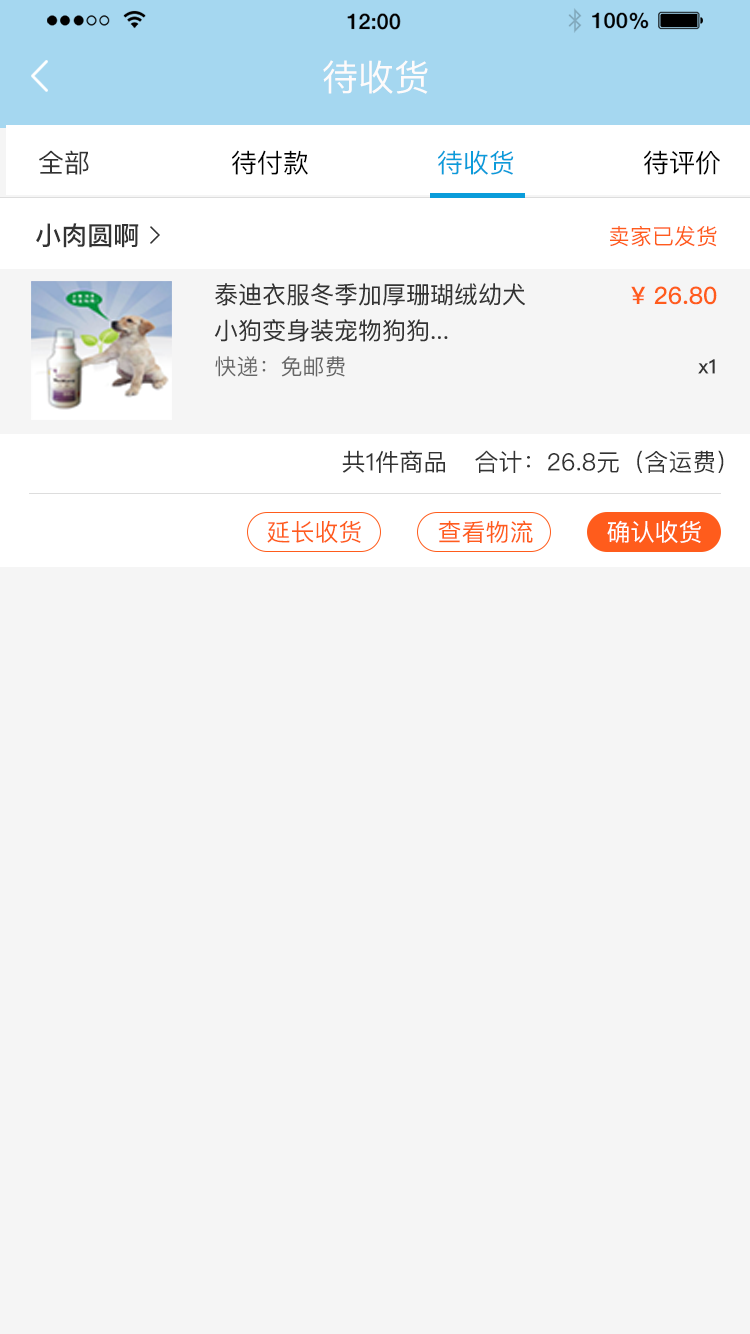
<style>
.page{position:relative;width:750px;height:1334px;background:#f5f5f5}
.page>*{position:absolute;margin:0}
.t1{font:36px "PingFangSC-Regular";color:#fefbfb}
.t2{font:26px "PingFangSC-Regular";color:#333333}
.t3{font:26px "PingFangSC-Regular";color:#000000}
.t4{font:26px "PingFangSC-Regular";color:#0a9cda}
.t5{font:26px "PingFangSC-Medium";color:#333333}
.t6{font:22px "PingFangSC-Regular";color:#ff5c1c}
.t7{font:24px/36px "PingFangSC";color:#333333}
.t8{font:24px "PingFangSC-Medium";color:#ff5c1c}
.t9{font:22px "PingFangSC-Regular";color:#666666}
.t10{font:20px "PingFangSC-Medium";color:#333333}
.t11{font:24px "PingFangSC-Regular";color:#333333}
.t12{font:24px "PingFangSC-Regular";color:#ff5c1c}
.t13{font:24px "PingFangSC-Regular";color:#ffffff}
</style>
<div class="page">
<p class="t1" style="left:323px;top:60px;width:105px;height:34px">待收货</p>
<p class="t2" style="left:39px;top:150px;width:50px;height:25px">全部</p>
<p class="t3" style="left:232px;top:150px;width:76px;height:25px">待付款</p>
<p class="t4" style="left:438px;top:150px;width:76px;height:25px">待收货</p>
<p class="t3" style="left:644px;top:150px;width:76px;height:25px">待评价</p>
<p class="t5" style="left:36px;top:223px;width:103px;height:25px">小肉圆啊</p>
<p class="t6" style="left:610px;top:225px;width:107px;height:22px">卖家已发货</p>
<p class="t7" style="left:214px;top:283px;width:311px;height:59px">泰迪衣服冬季加厚珊瑚绒幼犬<br>小狗变身装宠物狗狗...</p>
<p class="t8" style="left:631px;top:286px;width:86px;height:19px">¥ 26.80</p>
<p class="t9" style="left:215px;top:356px;width:130px;height:21px">快递：免邮费</p>
<p class="t10" style="left:698px;top:359px;width:17px;height:15px">x1</p>
<p class="t11" style="left:342px;top:450px;width:103px;height:23px">共1件商品</p>
<p class="t11" style="left:475px;top:450px;width:249px;height:23px">合计：26.8元（含运费）</p>
<p class="t12" style="left:267px;top:520px;width:94px;height:23px">延长收货</p>
<p class="t12" style="left:438px;top:520px;width:95px;height:23px">查看物流</p>
<p class="t13" style="left:607px;top:520px;width:94px;height:23px">确认收货</p>
</div>
